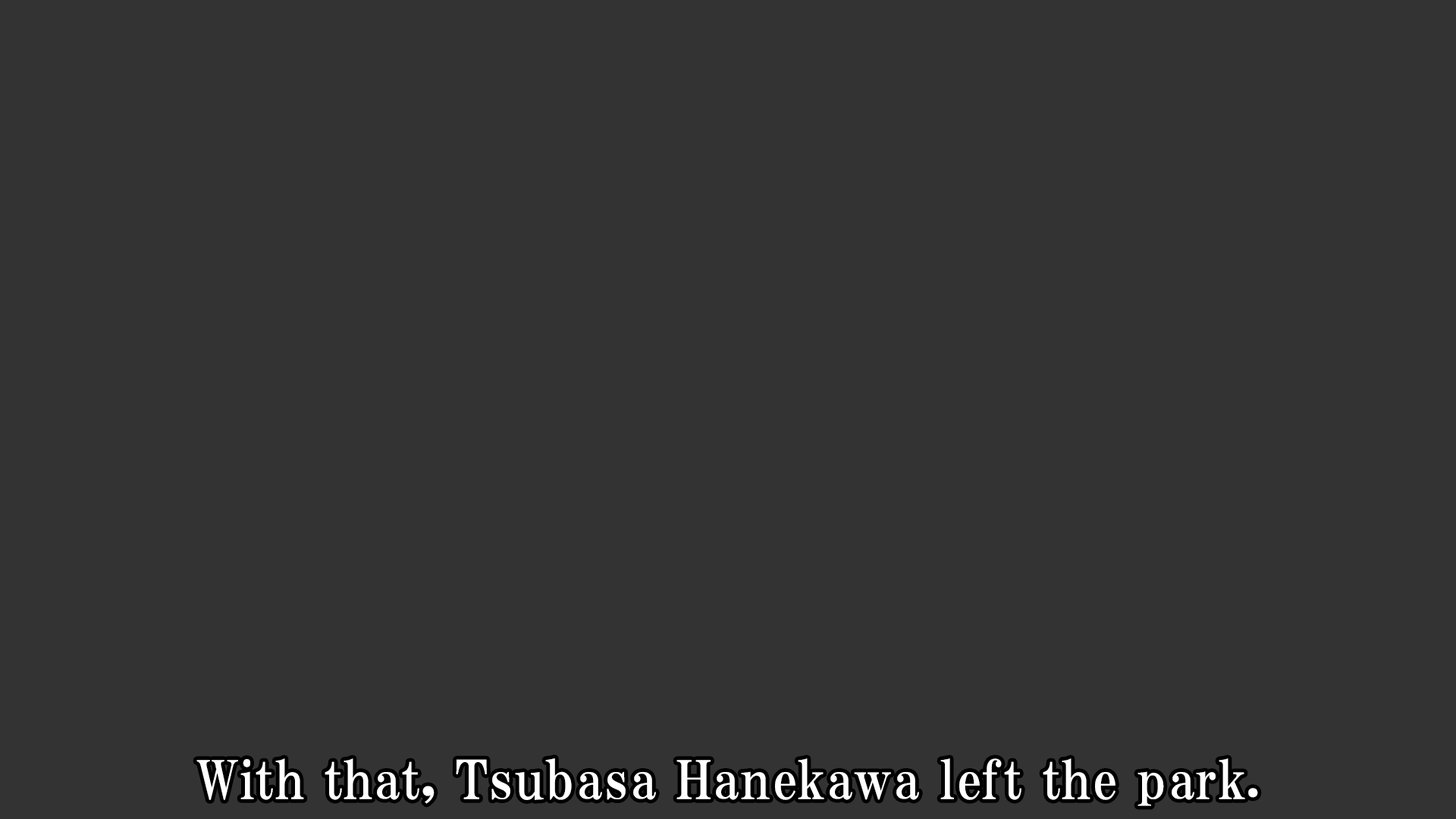
<style>
.page{position:relative;width:1456px;height:819px;background:#333333}
.page>*{position:absolute;margin:0}
.t1{font:53.1px "HGPMinchoE";letter-spacing:0.025em;color:#ffffff}
</style>
<div class="page">
<p class="t1" style="left:196px;top:758px;width:1062px;height:48px">With that, Tsubasa Hanekawa left the park.</p>
</div>
